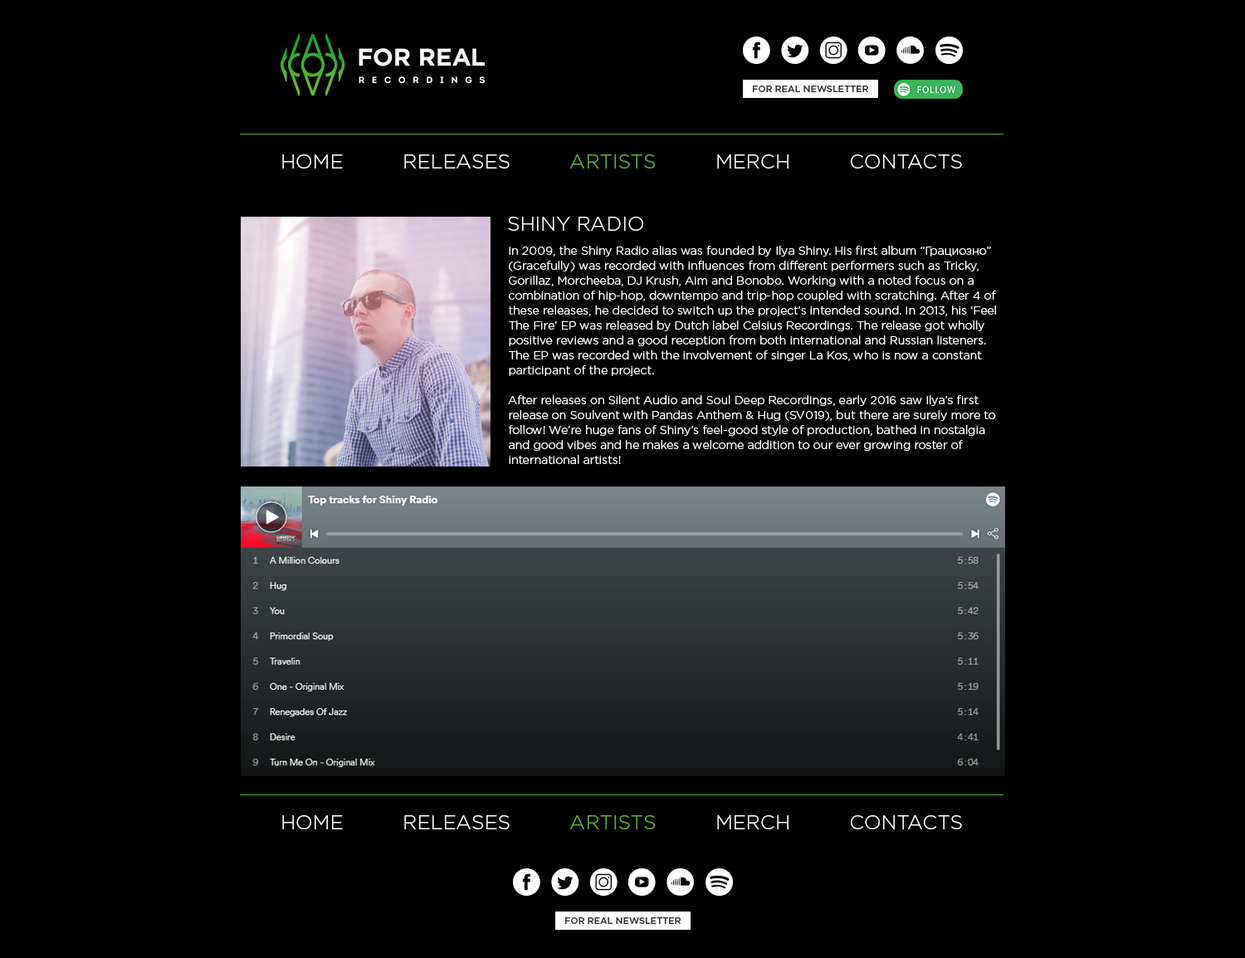
<style>
.page{position:relative;width:1245px;height:958px;background:#000000}
.page>*{position:absolute;margin:0}
.t1{font:9.1px "GothamPro-Medium";letter-spacing:-0.001em;color:#303030;text-transform:uppercase}
.t2{font:19.9px "GothamPro-Light";letter-spacing:-0.001em;color:#ffffff;text-transform:uppercase}
.t3{font:19.9px "GothamPro-Light";letter-spacing:-0.001em;color:#60b330;text-transform:uppercase}
.t4{font:11.6px/14.9px "GothamPro-Light";color:#ffffff}
</style>
<div class="page">
<p class="t1" style="left:753px;top:85px;width:116px;height:7px">for real NEWSLETTER</p>
<p class="t2" style="left:282px;top:154px;width:680px;height:14px">HOME          RELEASES          <span class="t3">ARTISTS</span>          MERCH          CONTACTS</p>
<p class="t2" style="left:508px;top:217px;width:135px;height:14px">Shiny radio</p>
<p class="t4" style="left:508px;top:246px;width:488px;height:218px">In 2009, the Shiny Radio alias was founded by Ilya Shiny. His first album “Грациозно” (Gracefully) was recorded with influences from different performers such as Tricky, Gorillaz, Morcheeba, DJ Krush, Aim and Bonobo. Working with a noted focus on a combination of hip-hop, downtempo and trip-hop coupled with scratching. After 4 of these releases, he decided to switch up the project’s intended sound. In 2013, his ‘Feel The Fire’ EP was released by Dutch label Celsius Recordings. The release got wholly positive reviews and a good reception from both international and Russian listeners. The EP was recorded with the involvement of singer La Kos, who is now a constant participant of the project.<br><br>After releases on Silent Audio and Soul Deep Recordings, early 2016 saw Ilya’s first release on Soulvent with Pandas Anthem &amp; Hug (SV019), but there are surely more to follow! We’re huge fans of Shiny’s feel-good style of production, bathed in nostalgia and good vibes and he makes a welcome addition to our ever growing roster of international artists!</p>
<p class="t2" style="left:282px;top:815px;width:680px;height:14px">HOME          RELEASES          <span class="t3">ARTISTS </span>         MERCH          CONTACTS</p>
<p class="t1" style="left:565px;top:917px;width:116px;height:7px">for real NEWSLETTER</p>
</div>
